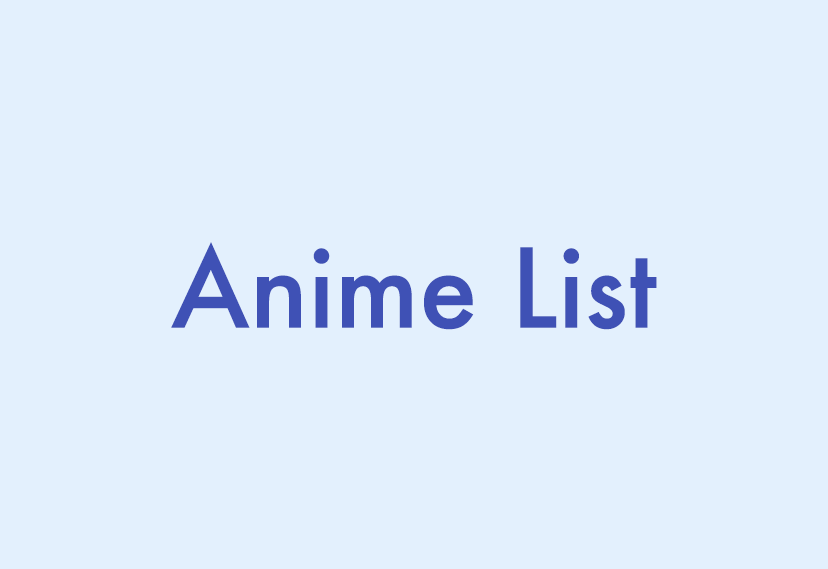
<style>
.page{position:relative;width:828px;height:569px;background:#e3f0fd}
.page>*{position:absolute;margin:0}
.t1{font:106.5px "Futura-Medium";color:#3f51b5}
</style>
<div class="page">
<p class="t1" style="left:171px;top:242px;width:486px;height:88px">Anime List</p>
</div>
